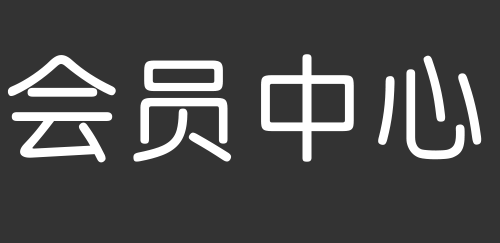
<style>
.page{position:relative;width:500px;height:243px;background:#333333}
.page>*{position:absolute;margin:0}
.t1{font:111.6px "STYuanti-TC-Regular";letter-spacing:0.1em;color:#ffffff}
</style>
<div class="page">
<p class="t1" style="left:7px;top:54px;width:475px;height:109px">会员中心</p>
</div>
